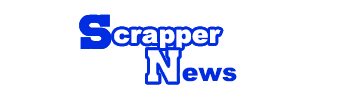
<style>
.page{position:relative;width:350px;height:100px;background:#ffffff}
.page>*{position:absolute;margin:0}
.t1{font:50px "BillsMafia";color:#002de1}
.t2{font:25px "Arial-Black";color:#ffffff}
.t3{font:50px "BillsMafia";color:#ffffff}
.t4{font:25px "Arial-Black";color:#002de1}
</style>
<div class="page">
<p class="t1" style="left:79px;top:14px;width:33px;height:35px">S</p>
<p class="t2" style="left:114px;top:29px;width:107px;height:19px">crapper</p>
<p class="t3" style="left:146px;top:48px;width:34px;height:35px">N</p>
<p class="t4" style="left:182px;top:67px;width:55px;height:15px">ews</p>
</div>
